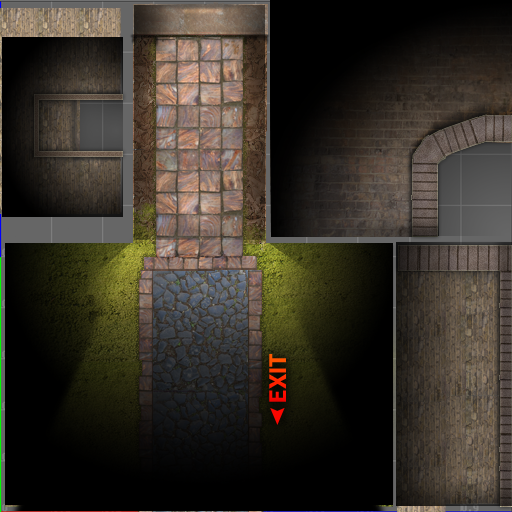
<style>
.page{position:relative;width:512px;height:512px}
.page>*{position:absolute;margin:0}
.t1{font:23.7px "Roboto-Black"}
</style>
<div class="page">
<p class="t1" style="left:269px;top:354px;width:17px;height:48px;rotate:-90deg">EXIT</p>
</div>
